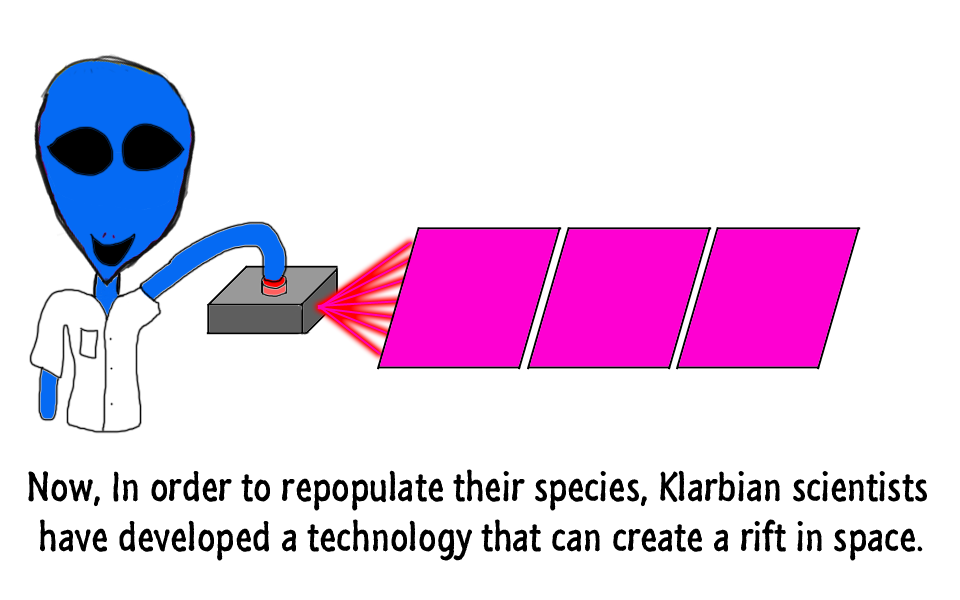
<style>
.page{position:relative;width:960px;height:600px;background:#ffffff}
.page>*{position:absolute;margin:0}
.t1{font:42px "SegoeMarker";color:#000000}
</style>
<div class="page">
<p class="t1" style="left:28px;top:469px;width:899px;height:92px;text-align:center">Now, In order to repopulate their species, Klarbian scientists <br>have developed a technology that can create a rift in space.</p>
</div>
